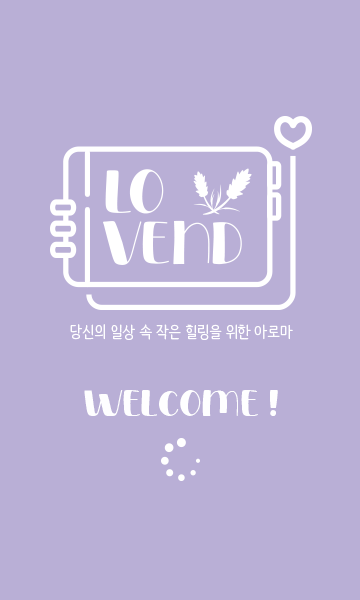
<style>
.page{position:relative;width:360px;height:600px;background:#b9afd6}
.page>*{position:absolute;margin:0}
.t1{font:16px "NanumBarunpenOTF";color:#fefeff}
.t2{font:35.3px "Dogname";color:#fefeff}
</style>
<div class="page">
<p class="t1" style="left:70px;top:324px;width:223px;height:16px">당신의 일상 속 작은 힐링을 위한 아로마</p>
<p class="t2" style="left:84px;top:390px;width:194px;height:26px">welcome !</p>
</div>
